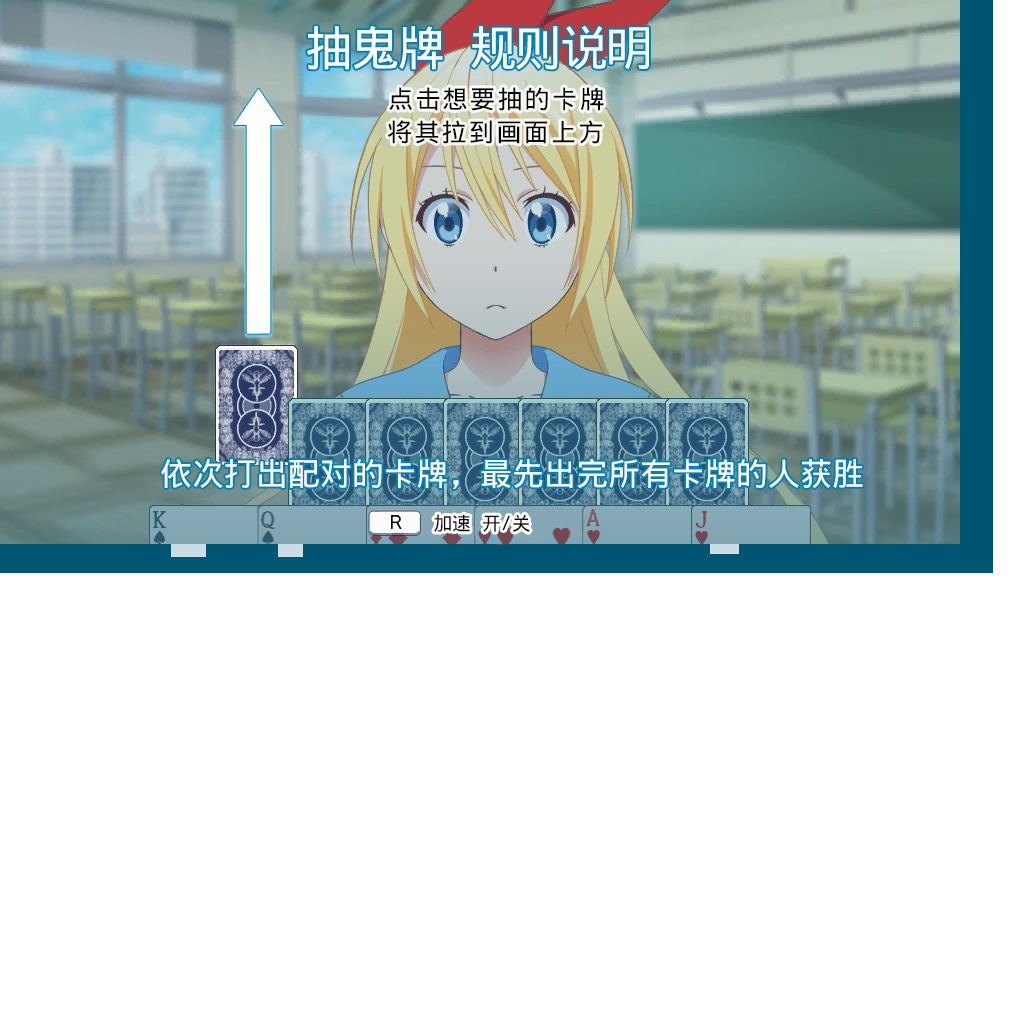
<style>
.page{position:relative;width:1024px;height:1024px;background:#ffffff}
.page>*{position:absolute;margin:0}
.t1{font:48px "WenQuanYiMicroHeiMono";letter-spacing:-0.05em;color:#ffffff}
.t2{font:25.3px "WenQuanYiMicroHeiMono";letter-spacing:0.08em;color:#000000}
.t3{font:32px "WenQuanYiMicroHeiMono";color:#ffffff}
.t4{font:18.7px "WenQuanYiMicroHeiMono";color:#010000}
</style>
<div class="page">
<p class="t1" style="left:307px;top:25px;width:342px;height:45px">抽鬼牌 规则说明</p>
<p class="t2" style="left:389px;top:87px;width:215px;height:24px">点击想要抽的卡牌</p>
<p class="t2" style="left:388px;top:120px;width:214px;height:24px">将其拉到画面上方</p>
<p class="t3" style="left:161px;top:458px;width:702px;height:31px">依次打出配对的卡牌，最先出完所有卡牌的人获胜</p>
<p class="t4" style="left:434px;top:514px;width:96px;height:18px">加速 开/关</p>
</div>
